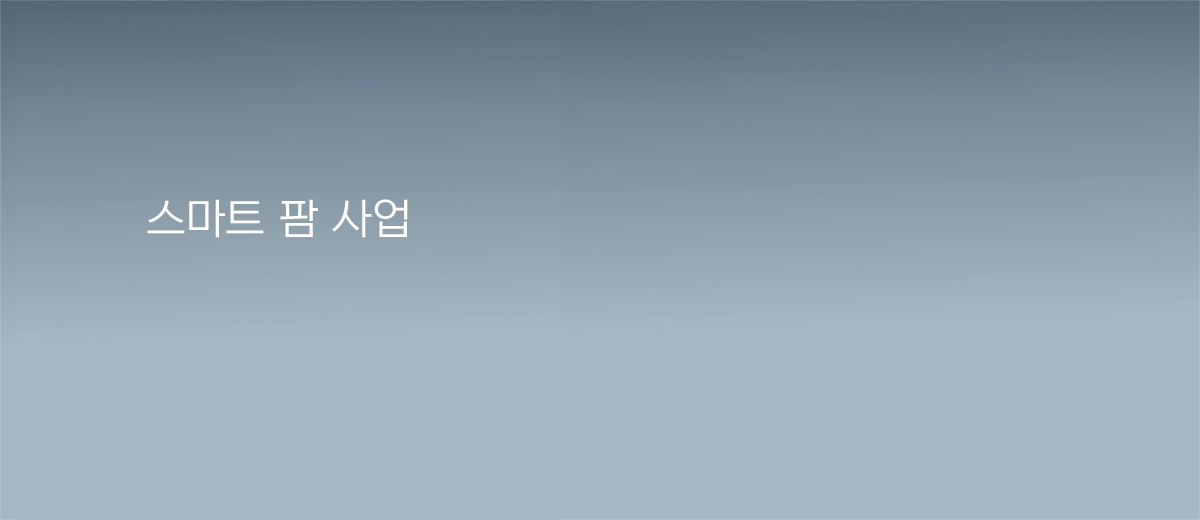
<style>
.page{position:relative;width:1200px;height:520px;background:#a6b6c3}
.page>*{position:absolute;margin:0}
.t1{font:42px "NEXONLv1GothicLowOTFRegular";color:#ffffff}
</style>
<div class="page">
<p class="t1" style="left:147px;top:199px;width:261px;height:39px">스마트 팜 사업</p>
</div>
